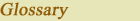
<style>
.page{position:relative;width:140px;height:21px;background:#e6e6b8}
.page>*{position:absolute;margin:0}
.t1{font:18px "TimesNewRomanPSMT";color:#915c07;font-weight:bold;font-style:italic}
</style>
<div class="page">
<p class="t1" style="left:0px;top:2px;width:69px;height:18px">Glossary</p>
</div>
